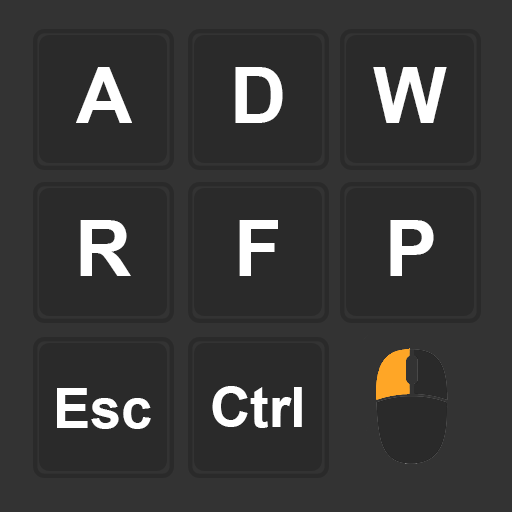
<style>
.page{position:relative;width:512px;height:512px;background:#2a2a2a}
.page>*{position:absolute;margin:0}
.t1{font:77.8px "Arial-BoldMT";color:#ffffff}
.t2{font:55.6px "Arial-BoldMT";color:#ffffff}
</style>
<div class="page">
<p class="t1" style="left:76px;top:67px;width:56px;height:56px">A</p>
<p class="t1" style="left:235px;top:67px;width:48px;height:56px">D</p>
<p class="t1" style="left:373px;top:67px;width:74px;height:56px">W</p>
<p class="t1" style="left:80px;top:220px;width:51px;height:56px">R</p>
<p class="t1" style="left:239px;top:220px;width:39px;height:56px">F</p>
<p class="t1" style="left:390px;top:220px;width:44px;height:56px">P</p>
<p class="t2" style="left:57px;top:388px;width:94px;height:41px">Esc</p>
<p class="t2" style="left:212px;top:386px;width:90px;height:42px">Ctrl</p>
</div>
